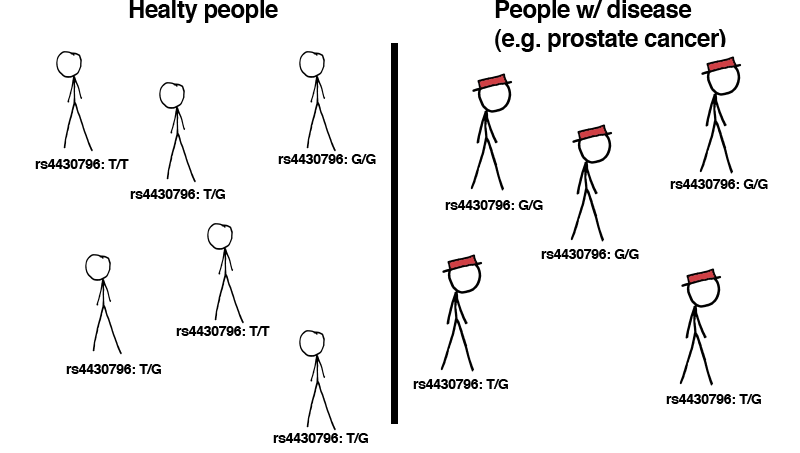
<style>
.page{position:relative;width:800px;height:453px;background:#ffffff}
.page>*{position:absolute;margin:0}
.t1{font:24px "Helvetica-Bold";letter-spacing:-0.02em;color:#000000}
.t2{font:14px "Helvetica-Bold";letter-spacing:-0.02em;color:#000000}
</style>
<div class="page">
<p class="t1" style="left:129px;top:0px;width:149px;height:23px">Healty people</p>
<p class="t1" style="left:495px;top:0px;width:231px;height:52px">People w/ disease<br>(e.g. prostate cancer)</p>
<p class="t2" style="left:35px;top:159px;width:94px;height:10px">rs4430796: T/T</p>
<p class="t2" style="left:278px;top:154px;width:98px;height:10px">rs4430796: G/G</p>
<p class="t2" style="left:670px;top:179px;width:98px;height:10px">rs4430796: G/G</p>
<p class="t2" style="left:130px;top:189px;width:95px;height:10px">rs4430796: T/G</p>
<p class="t2" style="left:445px;top:200px;width:98px;height:10px">rs4430796: G/G</p>
<p class="t2" style="left:541px;top:249px;width:98px;height:10px">rs4430796: G/G</p>
<p class="t2" style="left:176px;top:326px;width:94px;height:10px">rs4430796: T/T</p>
<p class="t2" style="left:66px;top:364px;width:95px;height:10px">rs4430796: T/G</p>
<p class="t2" style="left:413px;top:379px;width:95px;height:10px">rs4430796: T/G</p>
<p class="t2" style="left:666px;top:394px;width:95px;height:10px">rs4430796: T/G</p>
<p class="t2" style="left:273px;top:433px;width:95px;height:10px">rs4430796: T/G</p>
</div>
